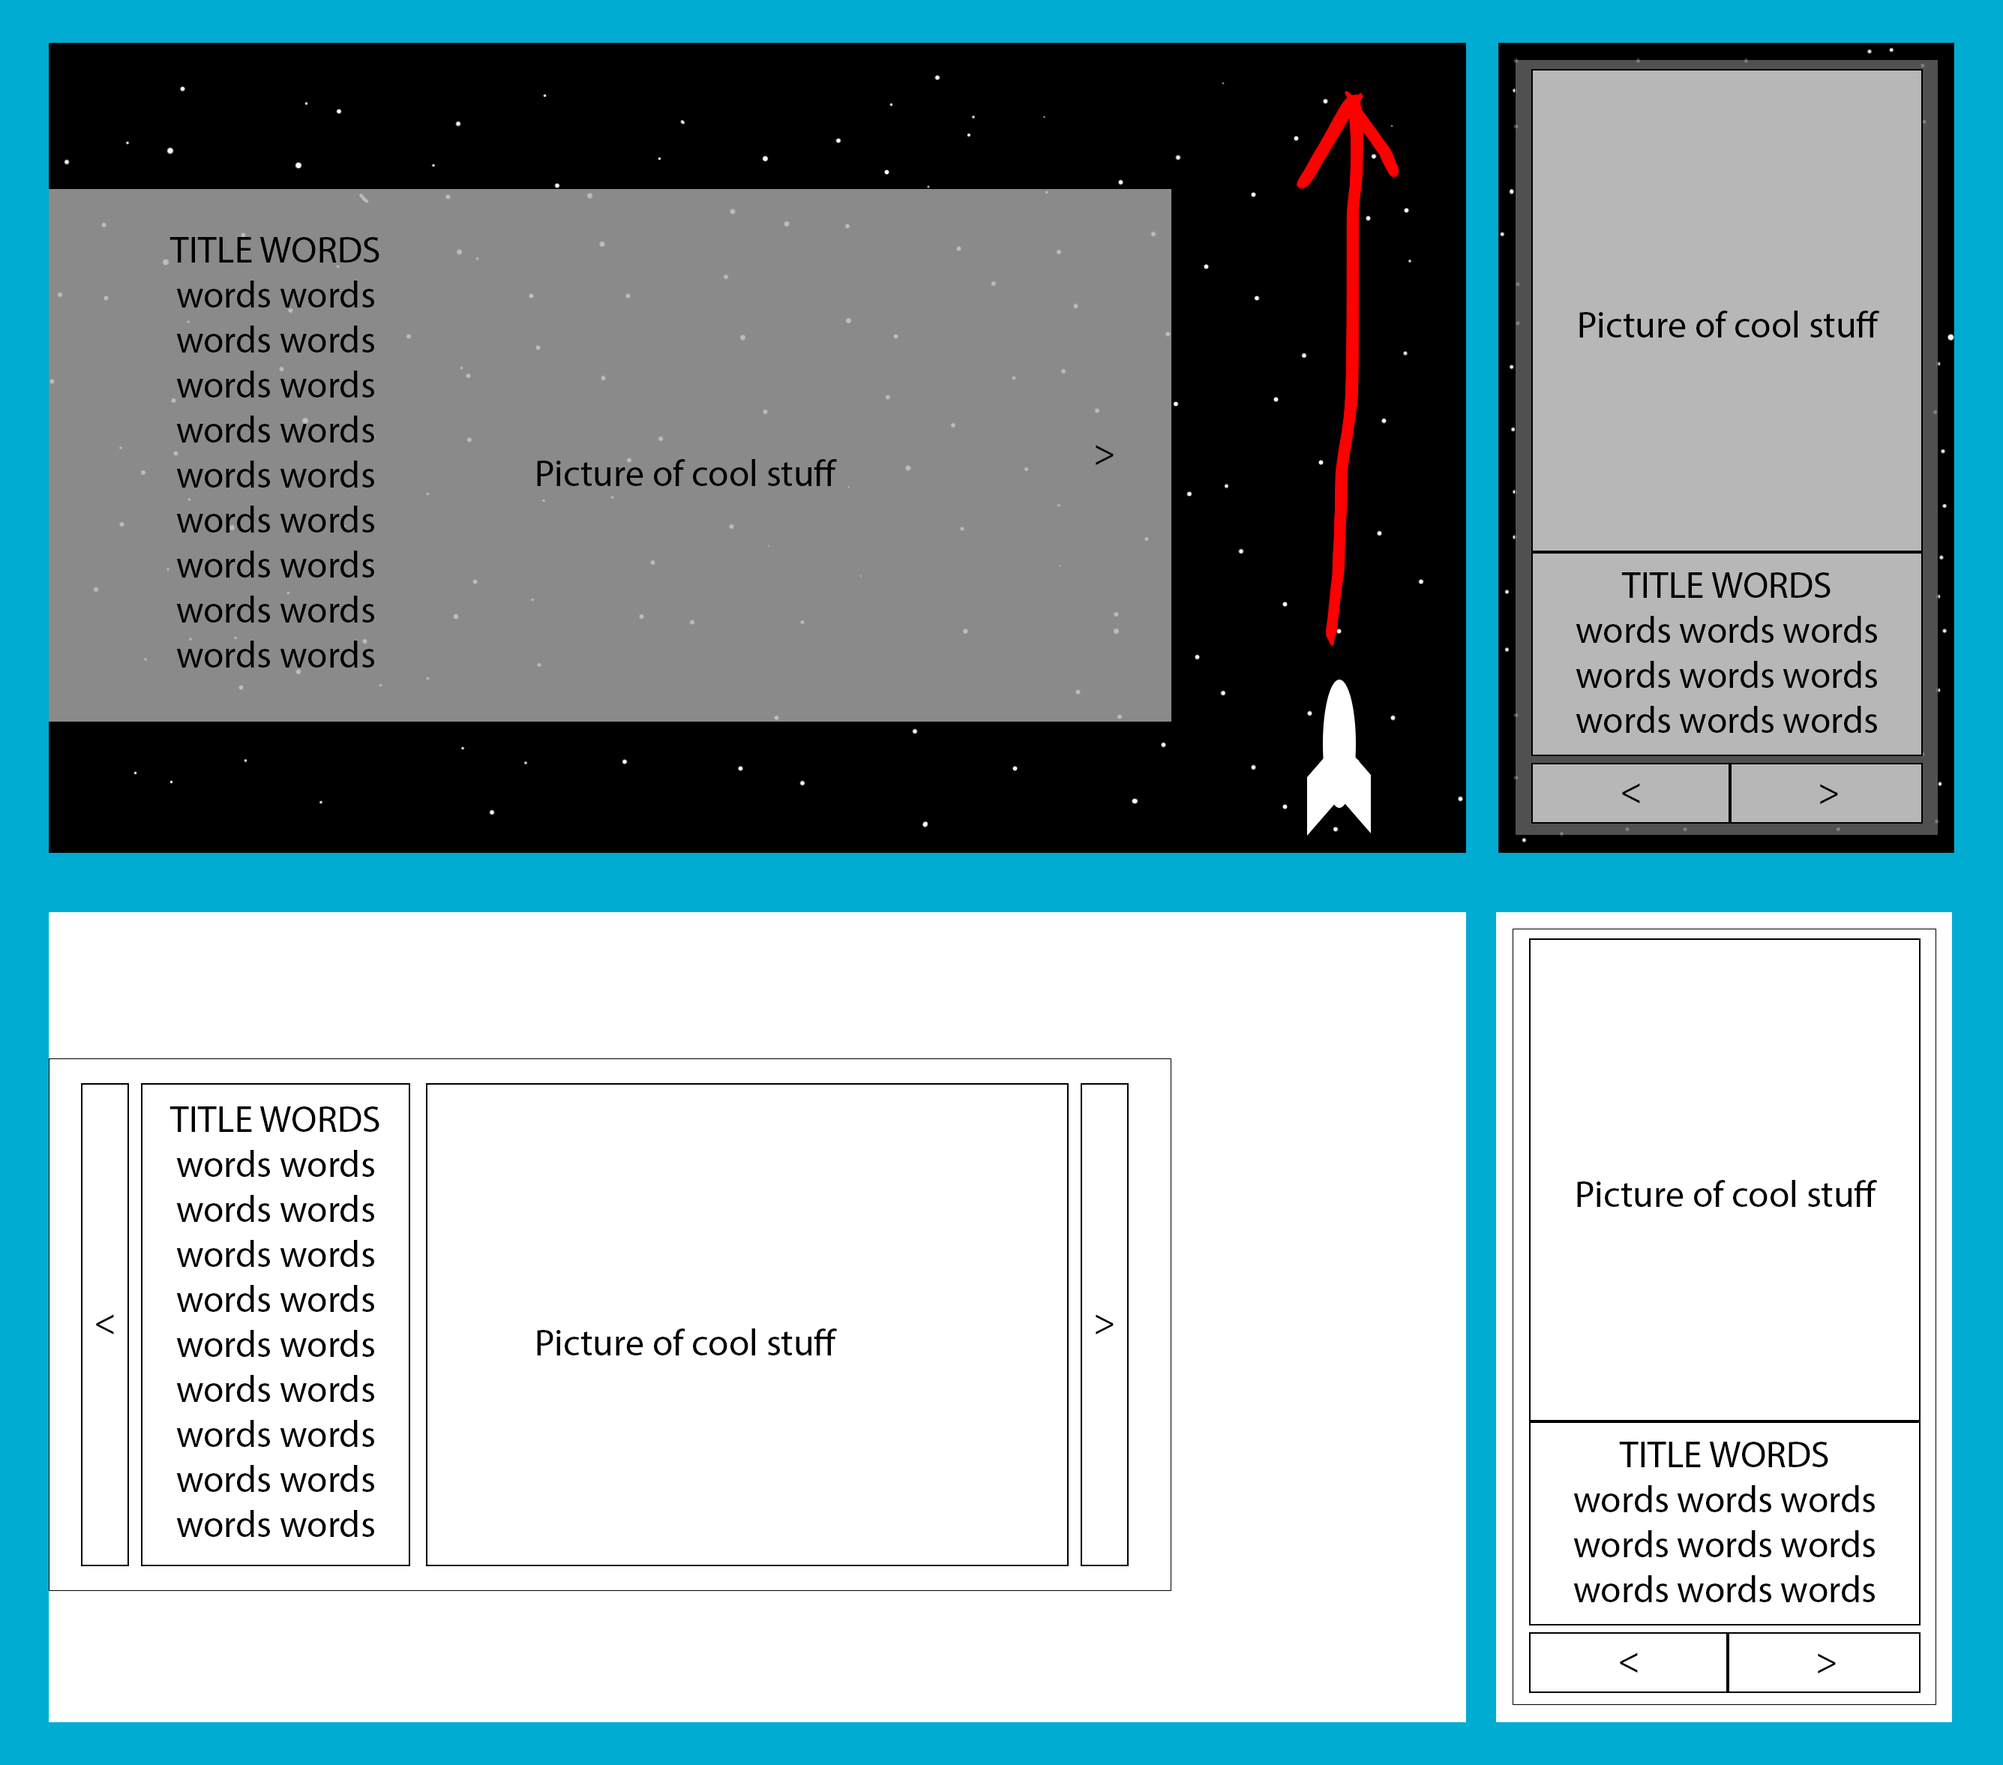
<style>
.page{position:relative;width:2003px;height:1765px;background:#ffffff}
.page>*{position:absolute;margin:0}
.t1{font:9px "MyriadPro-Regular";color:#000000}
</style>
<div class="page">
<p class="t1" style="left:170px;top:237px;width:210px;height:431px;text-align:center">TITLE WORDS<br>words words words words words words words words words words words words words words words words words words</p>
<p class="t1" style="left:1580px;top:310px;width:300px;height:28px;text-align:center">Picture of cool stuff</p>
<p class="t1" style="left:1096px;top:445px;width:18px;height:20px;text-align:center">&gt;</p>
<p class="t1" style="left:537px;top:459px;width:300px;height:27px;text-align:center">Picture of cool stuff</p>
<p class="t1" style="left:1576px;top:572px;width:301px;height:161px;text-align:center">TITLE WORDS<br>words words words words words words words words words</p>
<p class="t1" style="left:1622px;top:783px;width:18px;height:20px;text-align:center">&lt;</p>
<p class="t1" style="left:1820px;top:784px;width:18px;height:20px;text-align:center">&gt;</p>
<p class="t1" style="left:170px;top:1106px;width:210px;height:431px;text-align:center">TITLE WORDS<br>words words words words words words words words words words words words words words words words words words</p>
<p class="t1" style="left:1577px;top:1180px;width:300px;height:27px;text-align:center">Picture of cool stuff</p>
<p class="t1" style="left:96px;top:1314px;width:18px;height:20px;text-align:center">&lt;</p>
<p class="t1" style="left:1096px;top:1314px;width:18px;height:20px;text-align:center">&gt;</p>
<p class="t1" style="left:537px;top:1328px;width:300px;height:27px;text-align:center">Picture of cool stuff</p>
<p class="t1" style="left:1574px;top:1442px;width:301px;height:160px;text-align:center">TITLE WORDS<br>words words words words words words words words words</p>
<p class="t1" style="left:1620px;top:1652px;width:18px;height:20px;text-align:center">&lt;</p>
<p class="t1" style="left:1818px;top:1653px;width:18px;height:20px;text-align:center">&gt;</p>
</div>
